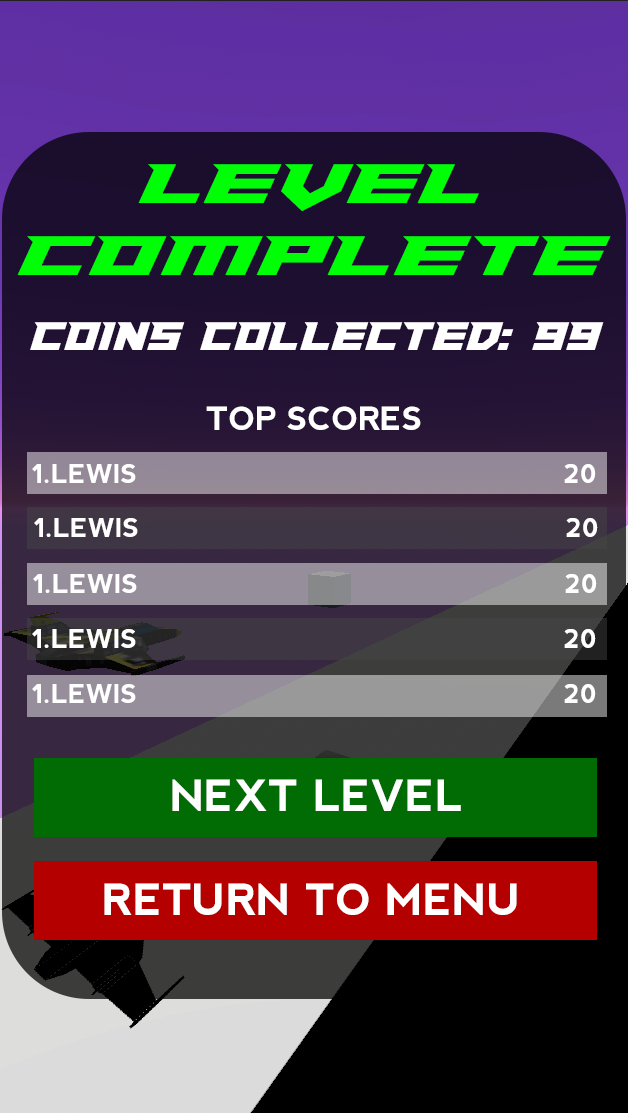
<style>
.page{position:relative;width:628px;height:1113px}
.page>*{position:absolute;margin:0}
.t1{font:60px "PaladinsExpanded";color:#00ff06}
.t2{font:43px "PaladinsCondensed";color:#ffffff}
.t3{font:32px "nevis-Bold";color:#ffffff}
.t4{font:26px "nevis-Bold";color:#ffffff}
.t5{font:43px "nevis-Bold";color:#ffffff}
</style>
<div class="page">
<p class="t1" style="left:17px;top:164px;width:594px;height:111px;text-align:center">LEVEL<br>COMPLETE</p>
<p class="t2" style="left:30px;top:322px;width:574px;height:28px">COINS COLLECTED: 99</p>
<p class="t3" style="left:206px;top:406px;width:215px;height:24px">TOP SCORES</p>
<p class="t4" style="left:32px;top:464px;width:564px;height:19px">1.LEWIS                                                20</p>
<p class="t4" style="left:34px;top:518px;width:564px;height:19px">1.LEWIS                                                20</p>
<p class="t4" style="left:33px;top:574px;width:564px;height:19px">1.LEWIS                                                20</p>
<p class="t4" style="left:32px;top:629px;width:564px;height:19px">1.LEWIS                                                20</p>
<p class="t4" style="left:32px;top:684px;width:564px;height:19px">1.LEWIS                                                20</p>
<p class="t5" style="left:172px;top:779px;width:289px;height:32px">NEXT LEVEL</p>
<p class="t5" style="left:104px;top:883px;width:413px;height:32px">RETURN TO MENU</p>
</div>
